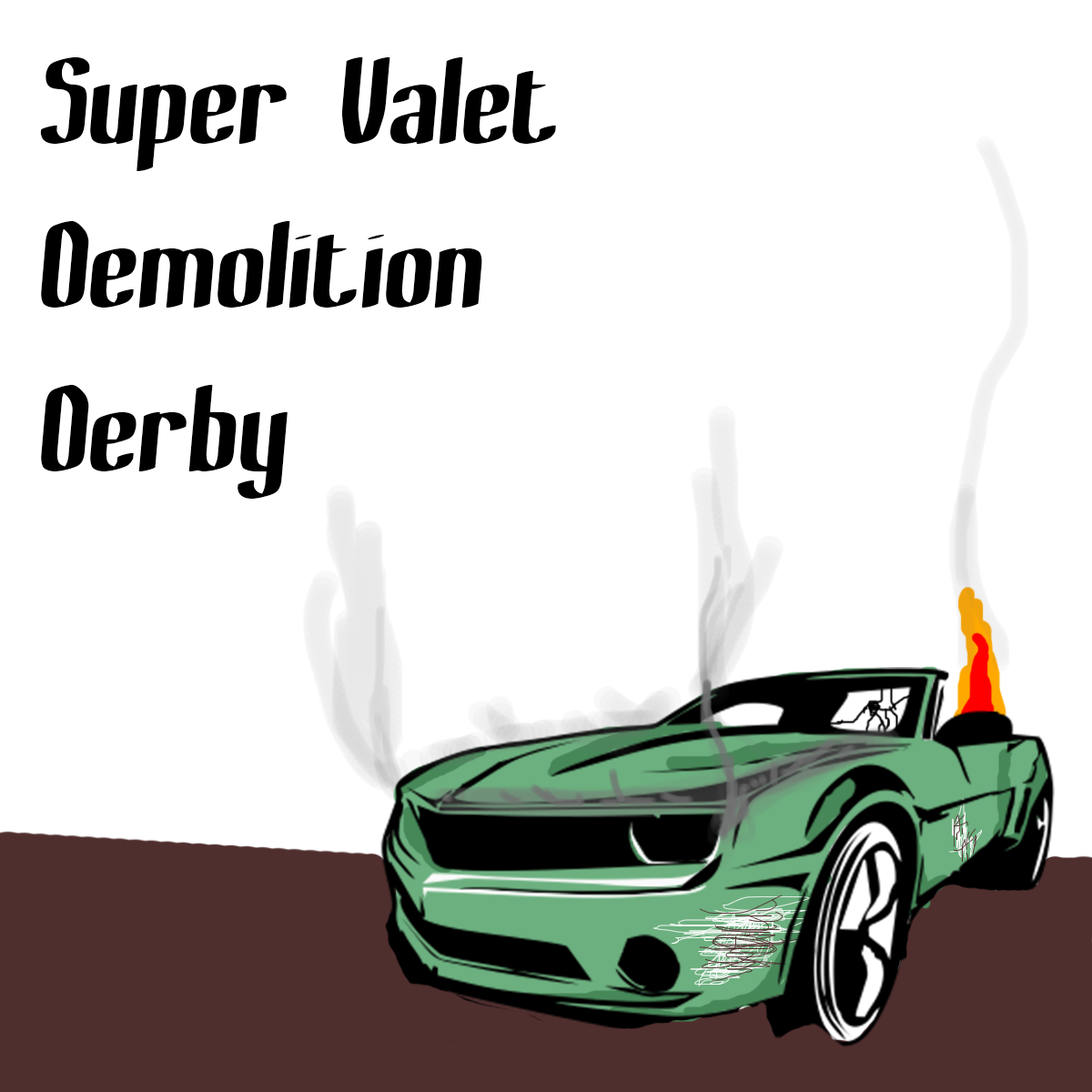
<style>
.page{position:relative;width:1092px;height:1092px;background:#ffffff}
.page>*{position:absolute;margin:0}
.t1{font:136.5px "BewilderThickBRK";color:#000000}
</style>
<div class="page">
<p class="t1" style="left:40px;top:56px;width:516px;height:443px">Super Valet <br>Demolition <br>Derby</p>
</div>
